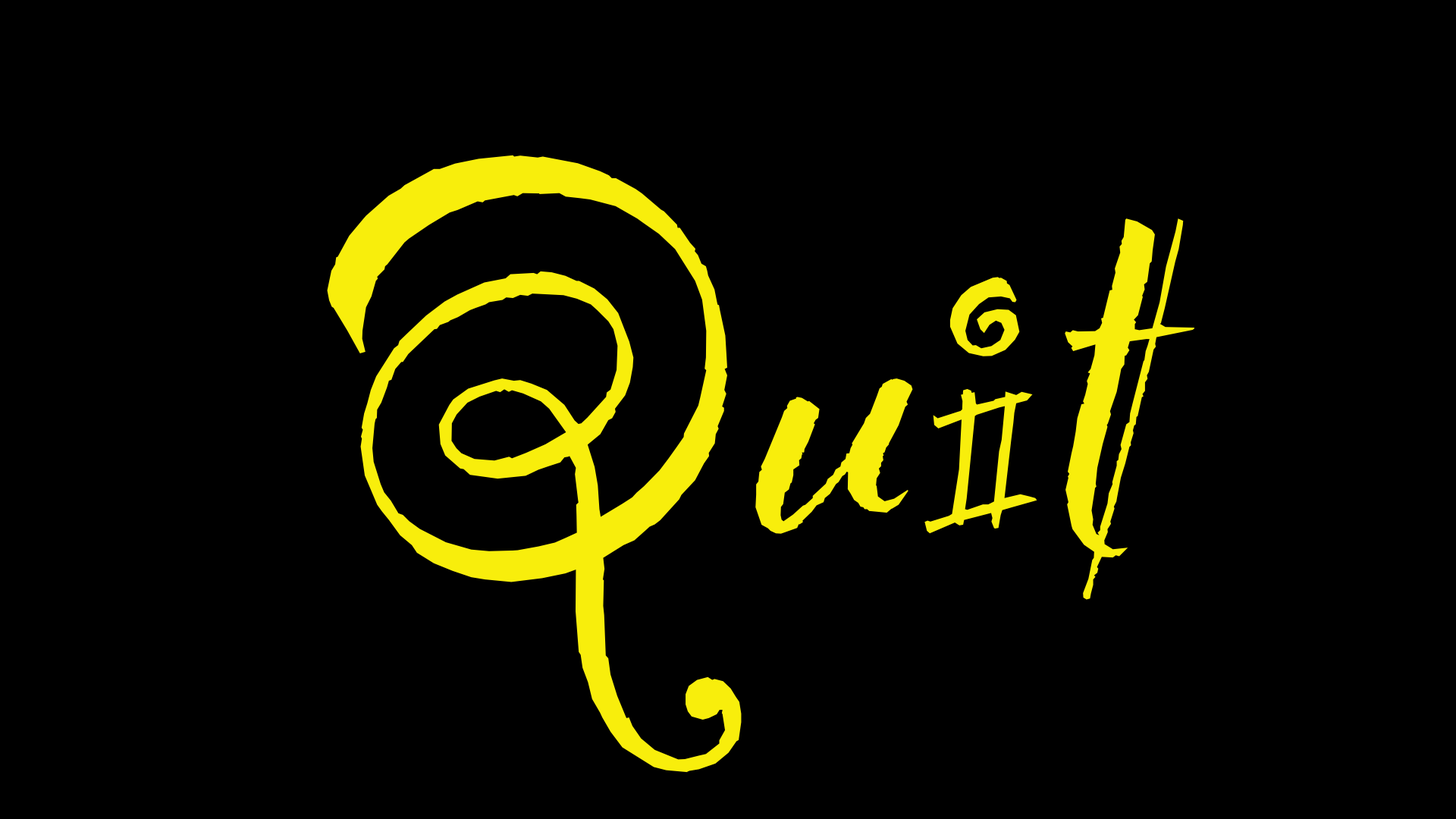
<style>
.page{position:relative;width:1456px;height:819px;background:#000000}
.page>*{position:absolute;margin:0}
.t1{font:651.2px "PartyLetPlain";color:#faed00}
</style>
<div class="page">
<p class="t1" style="left:0px;top:0px;width:1456px;height:819px">Quit</p>
</div>
